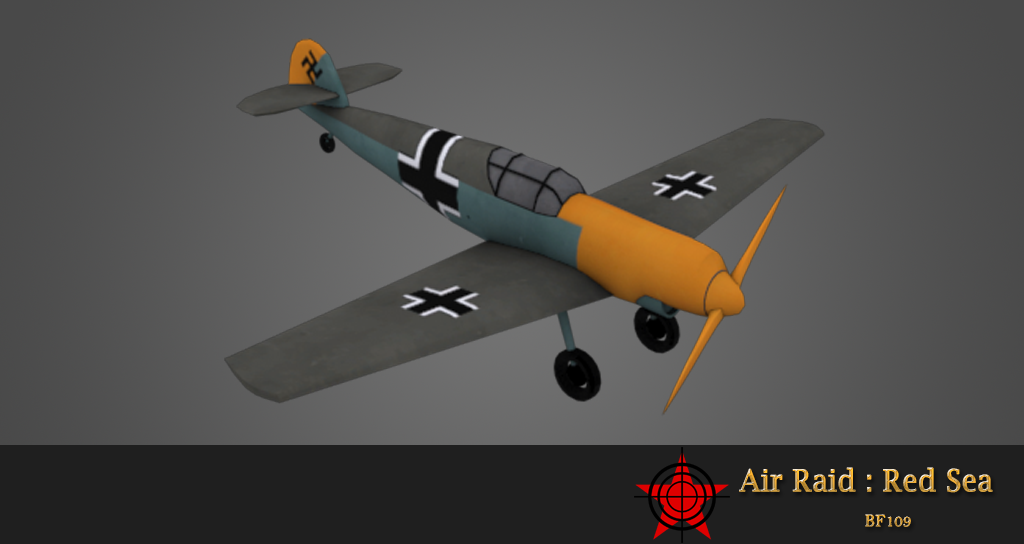
<style>
.page{position:relative;width:1024px;height:544px}
.page>*{position:absolute;margin:0}
.t1{font:30px "LucidaBright";font-weight:bold;scale:0.93 1}
.t2{font:17.5px "BellMT";font-weight:bold;scale:0.93 1}
</style>
<div class="page">
<p class="t1" style="left:739px;top:467px;width:254px;height:26px">Air Raid : Red Sea</p>
<p class="t2" style="left:865px;top:514px;width:46px;height:13px">BF109</p>
</div>
